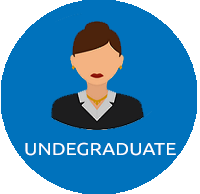
<style>
.page{position:relative;width:200px;height:194px;background:#0072bc}
.page>*{position:absolute;margin:0}
.t1{font:17.2px "Ubuntu";color:#ffffff;scale:1.14 1}
</style>
<div class="page">
<p class="t1" style="left:25px;top:142px;width:151px;height:14px">UNDEGRADUATE</p>
</div>
